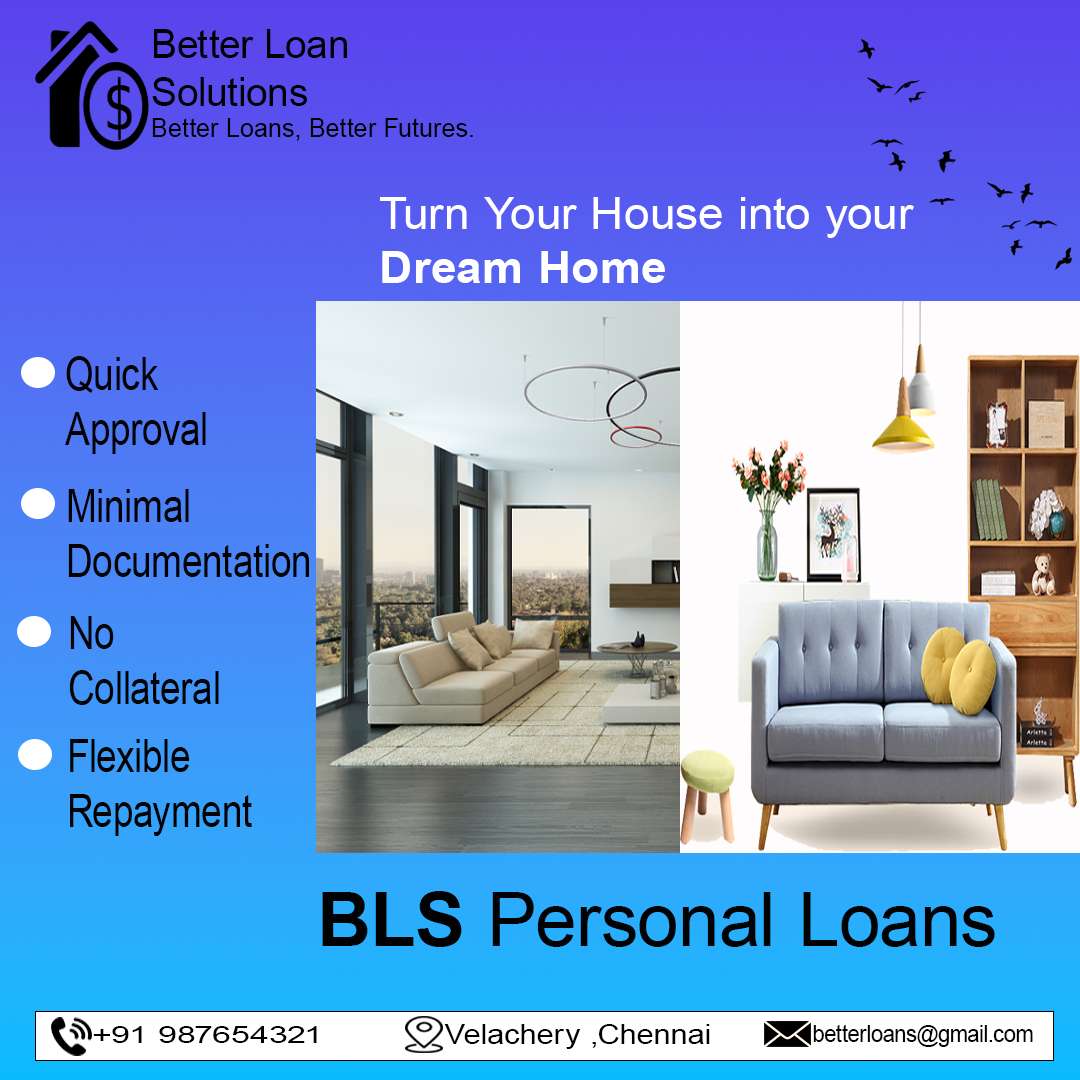
<style>
.page{position:relative;width:1080px;height:1080px}
.page>*{position:absolute;margin:0}
.t1{font:25.9px "ArialMT";letter-spacing:0.01em;color:#020202}
.t2{font:39.5px "ArialMT";letter-spacing:0.01em;color:#020202}
.t3{font:45.2px "ArialMT";letter-spacing:0.01em;color:#ffffff}
.t4{font:45.2px "Arial-BoldMT";letter-spacing:0.01em;color:#ffffff}
.t5{font:45.7px "ArialMT";letter-spacing:0.01em;color:#020202;scale:0.81 1}
.t6{font:75px "ArialMT";letter-spacing:0.01em;color:#020202}
.t7{font:75px "Arial-BoldMT";letter-spacing:0.01em;color:#020202}
.t8{font:26.6px "ArialMT";letter-spacing:0.01em;color:#020202;scale:1.18 1}
.t9{font:23.7px "ArialMT";letter-spacing:0.01em;color:#020202;scale:0.91 1}
.t10{font:24.4px "ArialMT";letter-spacing:0.01em;color:#020202;scale:1.39 1}
</style>
<div class="page">
<p class="t1" style="left:152px;top:29px;width:321px;height:112px"><span class="t2">Better Loan<br>Solutions<br></span>Better Loans, Better Futures.</p>
<p class="t3" style="left:380px;top:197px;width:534px;height:86px">Turn Your House into your <br><span class="t4">Dream Home</span></p>
<p class="t5" style="left:65px;top:356px;width:141px;height:98px">Quick<br>Approval</p>
<p class="t5" style="left:68px;top:489px;width:241px;height:88px">Minimal<br>Documentation</p>
<p class="t5" style="left:69px;top:616px;width:150px;height:89px">No<br>Collateral</p>
<p class="t5" style="left:70px;top:739px;width:182px;height:97px">Flexible<br>Repayment</p>
<p class="t6" style="left:322px;top:891px;width:673px;height:56px"><span class="t7">BLS </span>Personal Loans</p>
<p class="t8" style="left:444px;top:1024px;width:266px;height:25px">Velachery ,Chennai</p>
<p class="t9" style="left:813px;top:1024px;width:220px;height:23px">betterloans@gmail.com</p>
<p class="t10" style="left:93px;top:1026px;width:224px;height:17px">+91 987654321</p>
</div>
